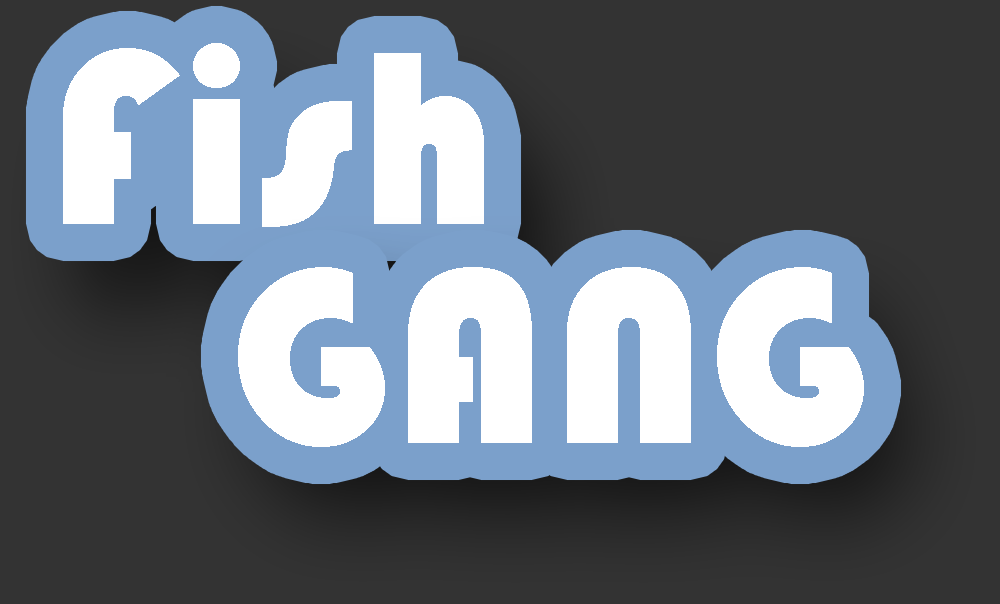
<style>
.page{position:relative;width:1000px;height:604px;background:#333333}
.page>*{position:absolute;margin:0}
.t1{font:256.6px "Bauhaus93";letter-spacing:0.025em;color:#ffffff}
</style>
<div class="page">
<p class="t1" style="left:63px;top:43px;width:421px;height:184px">Fish</p>
<p class="t1" style="left:238px;top:267px;width:626px;height:180px">GANG</p>
</div>
